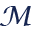
<style>
.page{position:relative;width:32px;height:32px;background:#ffffff}
.page>*{position:absolute;margin:0}
.t1{font:28px "LucidaCalligraphy-Italic";color:#172651}
</style>
<div class="page">
<p class="t1" style="left:0px;top:6px;width:31px;height:20px">M</p>
</div>
